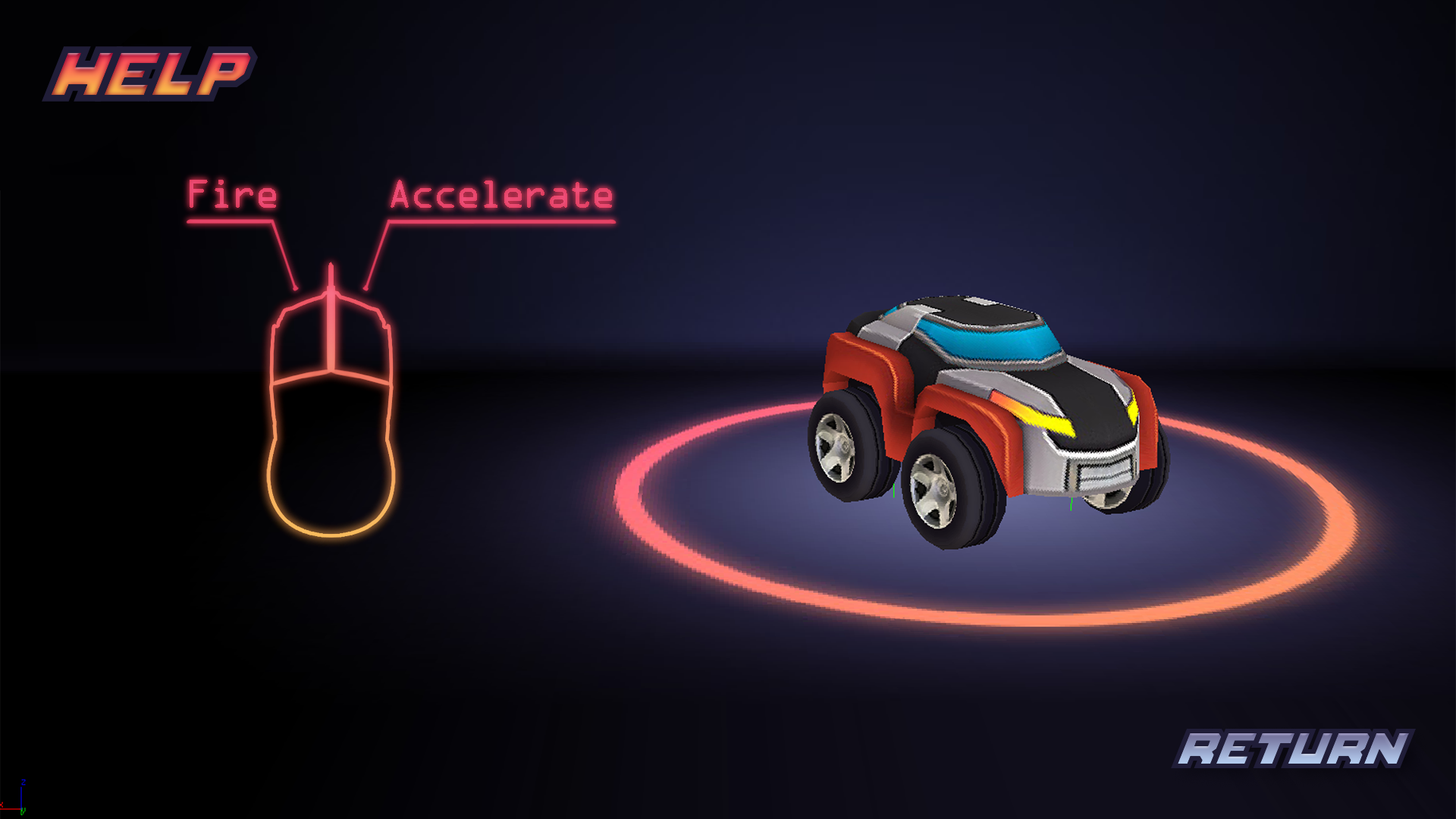
<style>
.page{position:relative;width:1456px;height:819px}
.page>*{position:absolute;margin:0}
.t1{font:56.9px "FullPack2025";letter-spacing:-0.04em;color:#201d38}
.t2{font:36.4px "OCRAStd";letter-spacing:-0.1em;color:#e8456b}
.t3{font:36.4px "OCRAStd";letter-spacing:-0.1em;color:#e8466b}
.t4{font:40.9px "FullPack2025";letter-spacing:-0.05em;color:#201d38}
</style>
<div class="page">
<p class="t1" style="left:42px;top:46px;width:216px;height:56px">Help</p>
<p class="t2" style="left:190px;top:180px;width:86px;height:28px">Fire</p>
<p class="t3" style="left:391px;top:180px;width:221px;height:28px">Accelerate</p>
<p class="t4" style="left:1171px;top:729px;width:245px;height:39px">Return</p>
</div>
